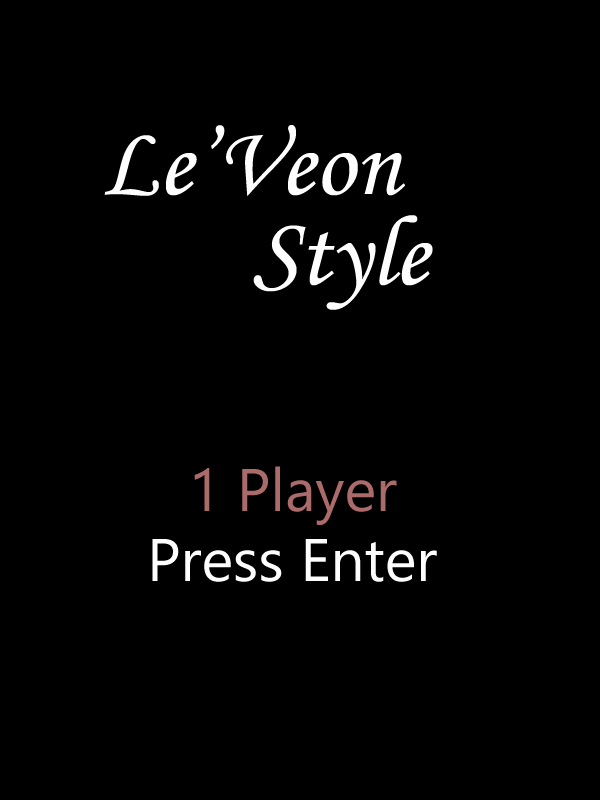
<style>
.page{position:relative;width:600px;height:800px;background:#000000}
.page>*{position:absolute;margin:0}
.t1{font:100px "MonotypeCorsiva";color:#fefefe}
.t2{font:60px "Ebrima";color:#ab6b6b}
.t3{font:60px "Ebrima";color:#fefefe}
</style>
<div class="page">
<p class="t1" style="left:104px;top:125px;width:301px;height:71px">Le’Veon</p>
<p class="t1" style="left:253px;top:215px;width:180px;height:95px">Style</p>
<p class="t2" style="left:194px;top:466px;width:203px;height:59px">1 Player</p>
<p class="t3" style="left:152px;top:539px;width:285px;height:43px">Press Enter</p>
</div>
